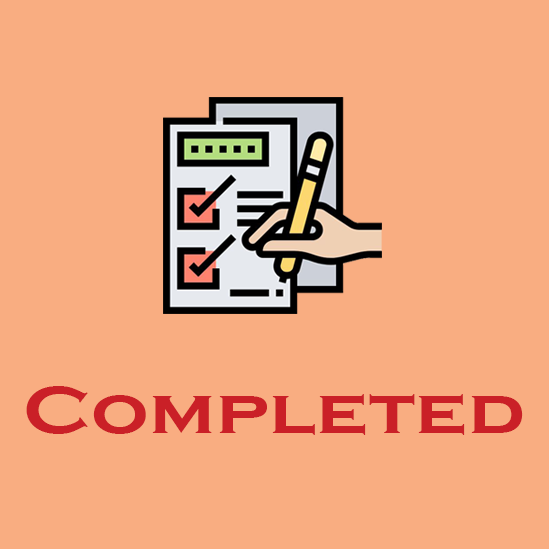
<style>
.page{position:relative;width:549px;height:549px;background:#f9ad81}
.page>*{position:absolute;margin:0}
.t1{font:68.9px "CopperplateGothic-Bold";color:#ca2027;scale:1.18 1}
</style>
<div class="page">
<p class="t1" style="left:26px;top:386px;width:497px;height:49px">Completed</p>
</div>
